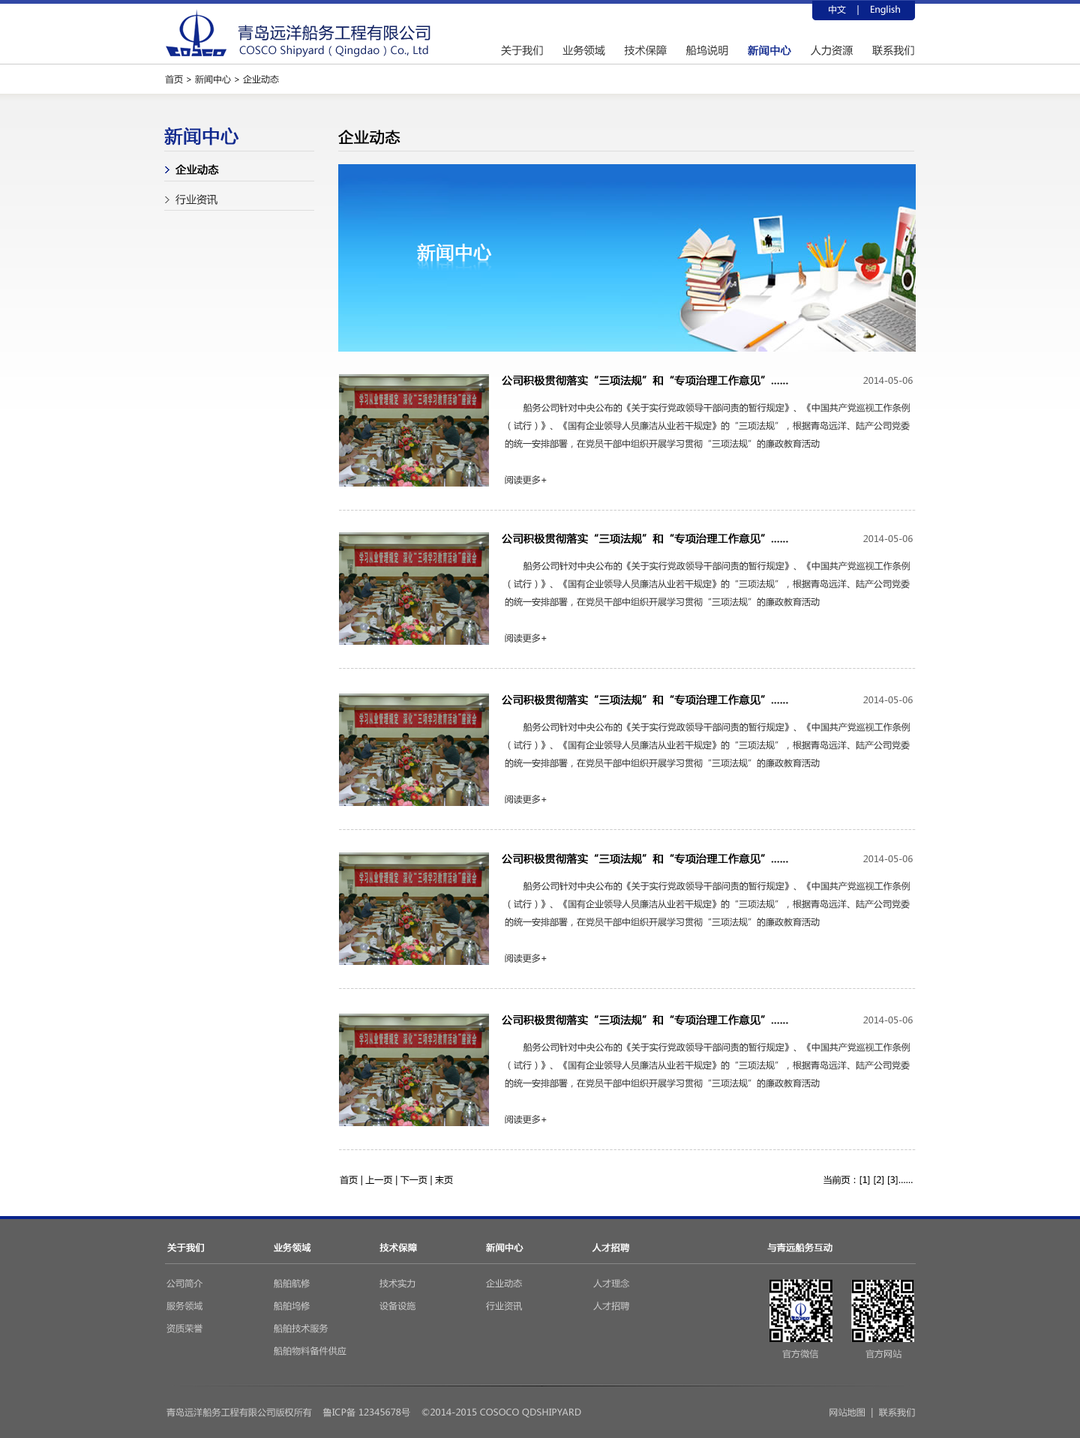
<style>
.page{position:relative;width:1080px;height:1438px;background:#ffffff}
.page>*{position:absolute;margin:0}
.t1{font:9px "MicrosoftYaHei";color:#ffffff}
.t2{font:15.8px "MicrosoftYaHei";letter-spacing:0.025em;color:#112262;text-transform:uppercase}
.t3{font:10.5px "MicrosoftYaHei";letter-spacing:0.01em;color:#112262}
.t4{font:10.5px "MicrosoftYaHei";letter-spacing:0.01em;color:#333333;text-transform:uppercase}
.t5{font:10.5px "MicrosoftYaHei";letter-spacing:0.01em;color:#10298e;text-transform:uppercase;font-weight:bold}
.t6{font:9px "MicrosoftYaHei";color:#272727}
.t7{font:18px "MicrosoftYaHei";letter-spacing:0.01em;color:#10298e;text-transform:uppercase;font-weight:bold}
.t8{font:15px "MicrosoftYaHei";letter-spacing:0.01em;color:#000000;text-transform:uppercase;font-weight:bold}
.t9{font:10.5px/30px "MicrosoftYaHei";color:#000000;font-weight:bold}
.t10{font:10.5px/30px "MicrosoftYaHei";color:#272727}
.t11{font:10.5px "MicrosoftYaHei";color:#000000;font-weight:bold}
.t12{font:9px "MicrosoftYaHei";color:#666666}
.t13{font:9px/18px "MicrosoftYaHei";color:#333333}
.t14{font:9px "MicrosoftYaHei";color:#333333}
.t15{font:9px "MicrosoftYaHei";letter-spacing:0.01em;color:#cccccc;text-transform:uppercase}
.t16{font:9px "MicrosoftYaHei";color:#000000}
.t17{font:9px "MicrosoftYaHei";letter-spacing:0.01em;color:#ffffff;text-transform:uppercase;font-weight:bold}
.t18{font:9px/22.5px "MicrosoftYaHei";letter-spacing:0.01em;color:#cccccc;text-transform:uppercase}
</style>
<div class="page">
<p class="t1" style="left:829px;top:5px;width:71px;height:10px">中文    |    English</p>
<p class="t2" style="left:238px;top:25px;width:192px;height:15px">青岛远洋船务工程有限公司</p>
<p class="t3" style="left:239px;top:45px;width:189px;height:12px">COSCO Shipyard（Qingdao）Co., Ltd</p>
<p class="t4" style="left:501px;top:45px;width:413px;height:11px">关于我们      业务领域      技术保障      船坞说明      <span class="t5">新闻中心</span>      人力资源      联系我们</p>
<p class="t6" style="left:165px;top:75px;width:114px;height:9px">首页 &gt; 新闻中心 &gt; 企业动态</p>
<p class="t7" style="left:164px;top:127px;width:75px;height:19px">新闻中心</p>
<p class="t8" style="left:338px;top:130px;width:62px;height:15px">企业动态</p>
<p class="t9" style="left:176px;top:164px;width:43px;height:41px">企业动态<br><span class="t10">行业资讯</span></p>
<p class="t11" style="left:502px;top:375px;width:411px;height:11px">公司积极贯彻落实“三项法规”和“专项治理工作意见”……                      <span class="t12">2014-05-06</span></p>
<p class="t13" style="left:505px;top:403px;width:405px;height:45px">船务公司针对中央公布的《关于实行党政领导干部问责的暂行规定》、《中国共产党巡视工作条例<br>（试行）》、《国有企业领导人员廉洁从业若干规定》的“三项法规”，根据青岛远洋、陆产公司党委<br>的统一安排部署，在党员干部中组织开展学习贯彻“三项法规”的廉政教育活动</p>
<p class="t14" style="left:505px;top:476px;width:42px;height:8px">阅读更多+</p>
<p class="t15" style="left:339px;top:510px;width:577px;height:1px">-------------------------------------------------------------------------------------------------------------------------------------------------</p>
<p class="t16" style="left:340px;top:1176px;width:573px;height:10px">首页 | 上一页 | 下一页 | 末页                                                                                                                                           当前页：[1] [2] [3]……</p>
<p class="t17" style="left:167px;top:1243px;width:665px;height:9px">关于我们                       业务领域                       技术保障                       新闻中心                       人才招聘                                              与青远船务互动</p>
<p class="t18" style="left:166px;top:1280px;width:36px;height:54px">公司简介<br>服务领域<br>资质荣誉</p>
<p class="t18" style="left:274px;top:1280px;width:72px;height:76px">船舶航修<br>船舶坞修<br>船舶技术服务<br>船舶物料备件供应</p>
<p class="t18" style="left:380px;top:1280px;width:36px;height:31px">技术实力<br>设备设施</p>
<p class="t18" style="left:486px;top:1280px;width:37px;height:31px">企业动态<br>行业资讯</p>
<p class="t18" style="left:593px;top:1280px;width:36px;height:31px">人才理念<br>人才招聘</p>
<p class="t15" style="left:782px;top:1350px;width:120px;height:9px">官方微信                 官方网站</p>
<p class="t15" style="left:166px;top:1408px;width:749px;height:10px">青岛远洋船务工程有限公司版权所有    鲁ICP备 12345678号    ©2014-2015 COSOCO QDSHIPYARD                                                                                          网站地图  |  联系我们</p>
</div>
